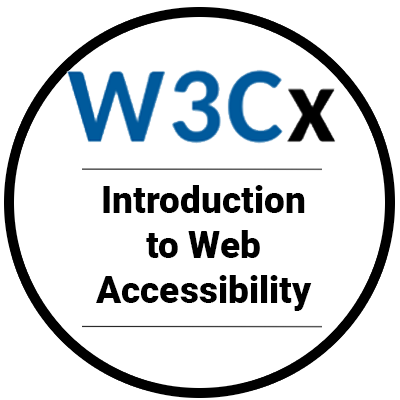
<style>
.page{position:relative;width:400px;height:400px;background:#ffffff}
.page>*{position:absolute;margin:0}
.t1{font:37.2px "Roboto-Black";color:#000000}
</style>
<div class="page">
<p class="t1" style="left:96px;top:185px;width:216px;height:126px;text-align:center">Introduction<br>to Web Accessibility</p>
</div>
